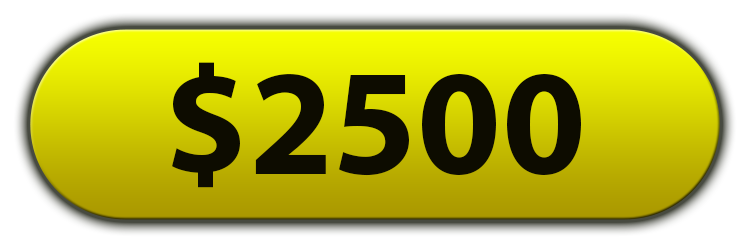
<style>
.page{position:relative;width:750px;height:250px}
.page>*{position:absolute;margin:0}
.t1{font:152.4px "MyriadPro-Bold";color:#0d0c00}
</style>
<div class="page">
<p class="t1" style="left:172px;top:62px;width:409px;height:126px">$2500</p>
</div>
